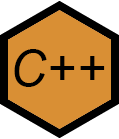
<style>
.page{position:relative;width:119px;height:139px;background:#d98f34}
.page>*{position:absolute;margin:0}
.t1{font:50px "Arial-ItalicMT";color:#000000}
</style>
<div class="page">
<p class="t1" style="left:14px;top:49px;width:91px;height:38px">C++</p>
</div>
